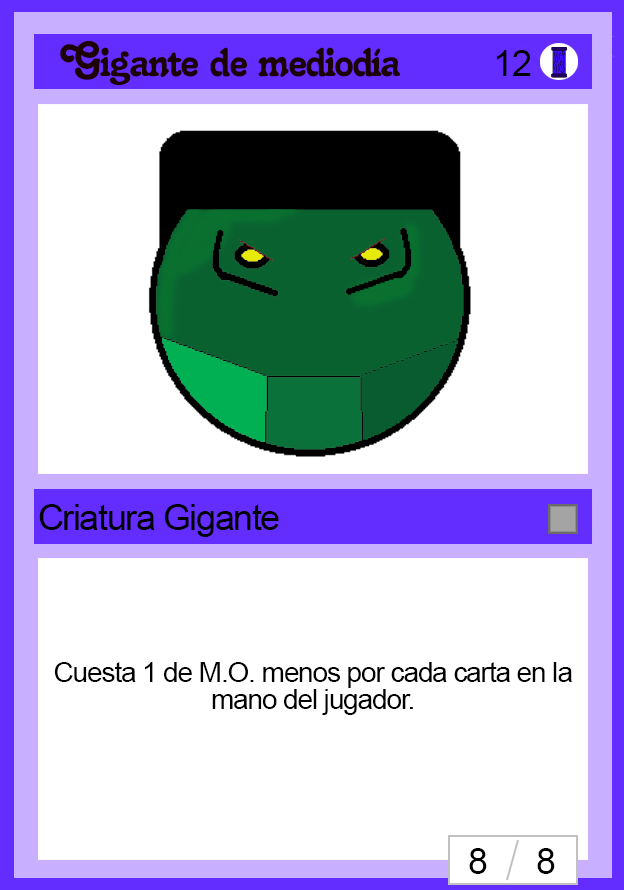
<style>
.page{position:relative;width:624px;height:890px;background:#ffffff}
.page>*{position:absolute;margin:0}
.t1{font:48px "Salina";letter-spacing:-0.04em;color:#1d0202}
.t2{font:36px "ArialMT";letter-spacing:-0.04em;color:#000000}
.t3{font:28px/27px "ArialMT";letter-spacing:-0.04em;color:#000000}
</style>
<div class="page">
<p class="t1" style="left:60px;top:41px;width:341px;height:44px">Gigante de mediodía</p>
<p class="t2" style="left:496px;top:50px;width:35px;height:26px">12</p>
<p class="t2" style="left:39px;top:504px;width:240px;height:33px">Criatura Gigante</p>
<p class="t3" style="left:54px;top:662px;width:518px;height:53px;text-align:center">Cuesta 1 de M.O. menos por cada carta en la mano del jugador.</p>
<p class="t2" style="left:469px;top:848px;width:18px;height:26px">8</p>
<p class="t2" style="left:537px;top:848px;width:18px;height:26px">8</p>
</div>
